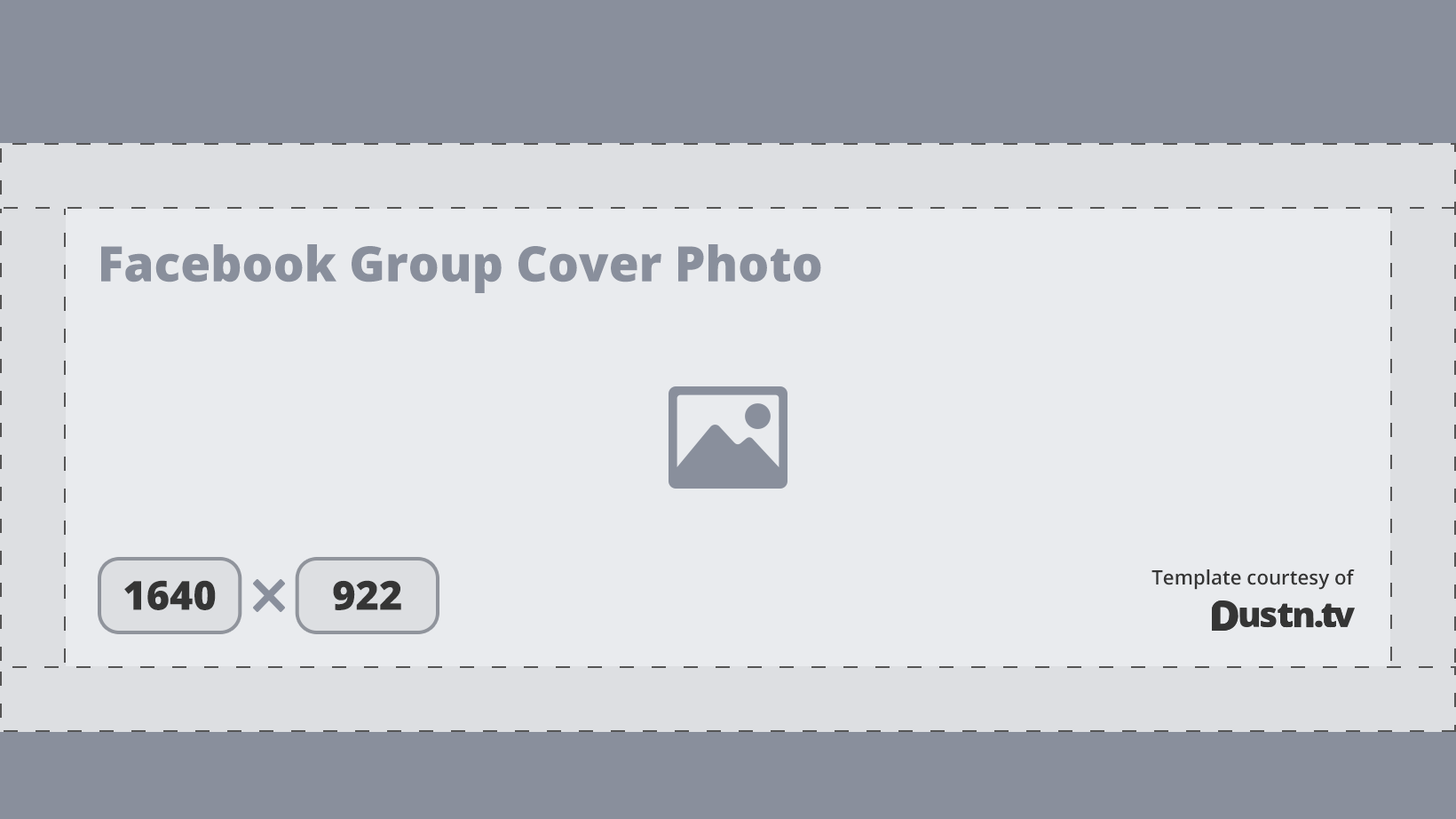
<style>
.page{position:relative;width:1456px;height:819px;background:#e9ebee}
.page>*{position:absolute;margin:0}
.t1{font:48.8px "OpenSans-Extrabold";color:#898f9c}
.t2{font:19.8px "OpenSans-Semibold";color:#353535}
.t3{font:40.3px "OpenSans-Extrabold";color:#353535}
</style>
<div class="page">
<p class="t1" style="left:101px;top:244px;width:720px;height:49px">Facebook Group Cover Photo</p>
<p class="t2" style="left:1152px;top:569px;width:203px;height:21px">Template courtesy of</p>
<p class="t3" style="left:124px;top:580px;width:92px;height:30px">1640</p>
<p class="t3" style="left:333px;top:580px;width:68px;height:30px">922</p>
</div>
